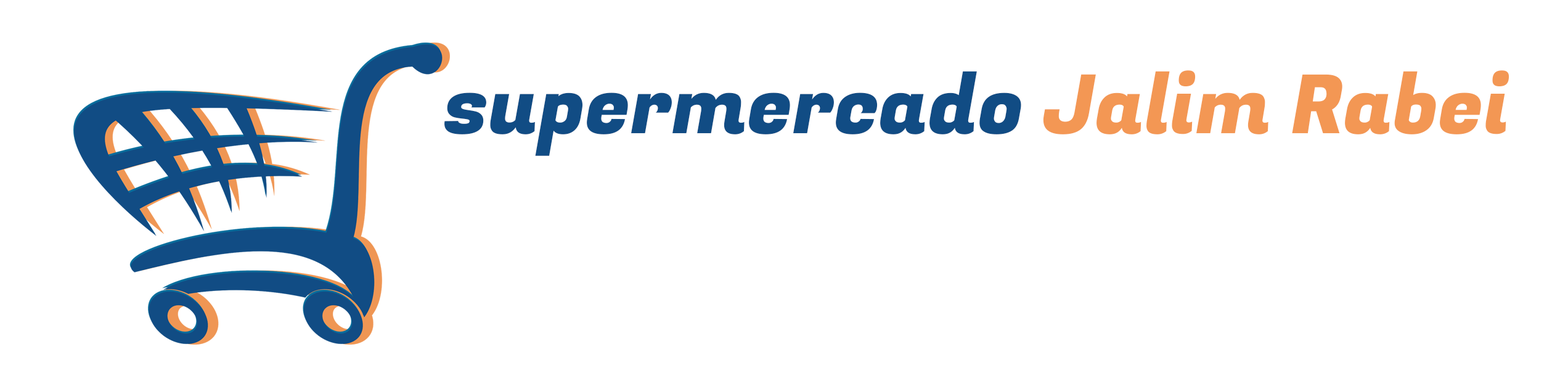
<style>
.page{position:relative;width:1568px;height:381px;background:#ffffff}
.page>*{position:absolute;margin:0}
.t1{font:81.4px "FugazOne-Regular";color:#114c84}
.t2{font:81.4px "FugazOne-Regular";color:#f39753}
</style>
<div class="page">
<p class="t1" style="left:444px;top:70px;width:1065px;height:86px">supermercado <span class="t2">Jalim Rabei</span></p>
</div>
